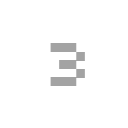
<style>
.page{position:relative;width:128px;height:128px;background:#ffffff}
.page>*{position:absolute;margin:0}
.t1{font:72px "Silkscreen";color:#a3a3a3}
</style>
<div class="page">
<p class="t1" style="left:50px;top:43px;width:35px;height:43px">3</p>
</div>
